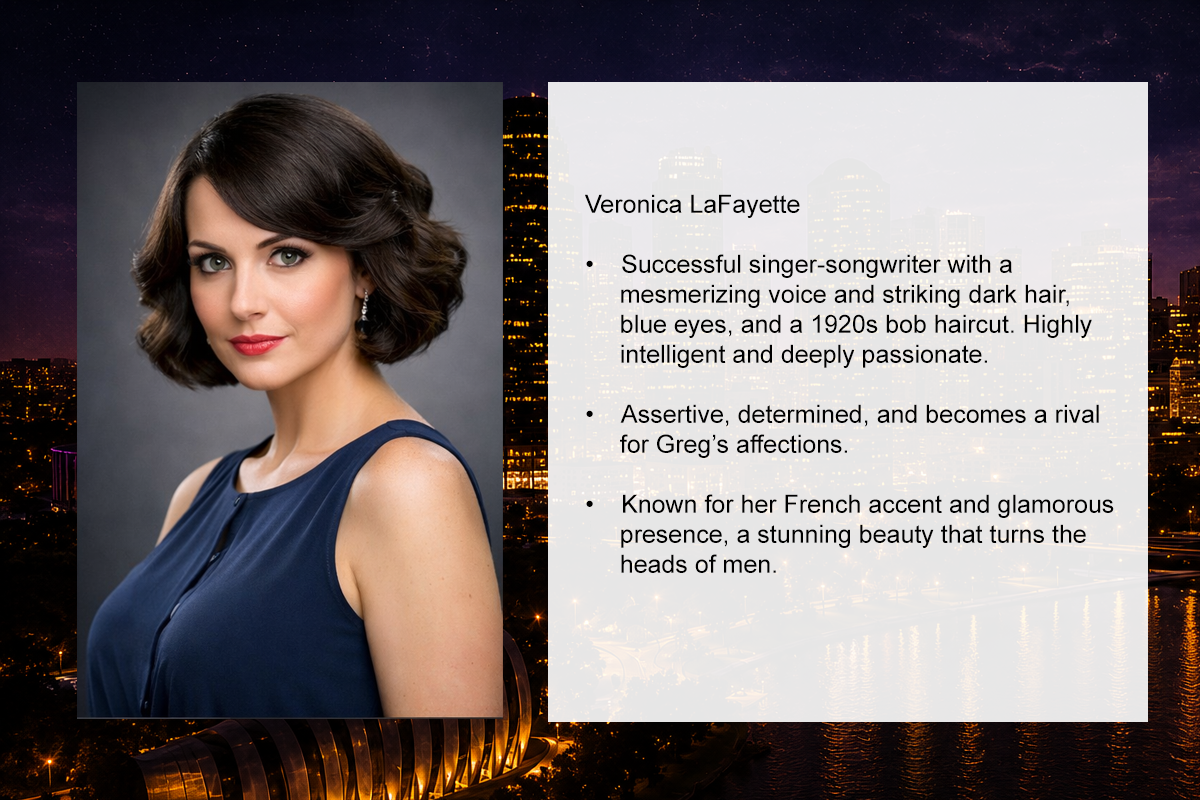
<style>
.page{position:relative;width:1200px;height:800px}
.page>*{position:absolute;margin:0}
.t1{font:25px "ArialMT";color:#000000}
</style>
<div class="page">
<p class="t1" style="left:585px;top:194px;width:529px;height:379px">Veronica LaFayette<br><br>• Successful singer-songwriter with a <br>     mesmerizing voice and striking dark hair,<br>     blue eyes, and a 1920s bob haircut. Highly <br>     intelligent and deeply passionate.<br><br>• Assertive, determined, and becomes a rival <br>     for Greg’s affections.<br><br>• Known for her French accent and glamorous <br>     presence, a stunning beauty that turns the <br>     heads of men.</p>
</div>
